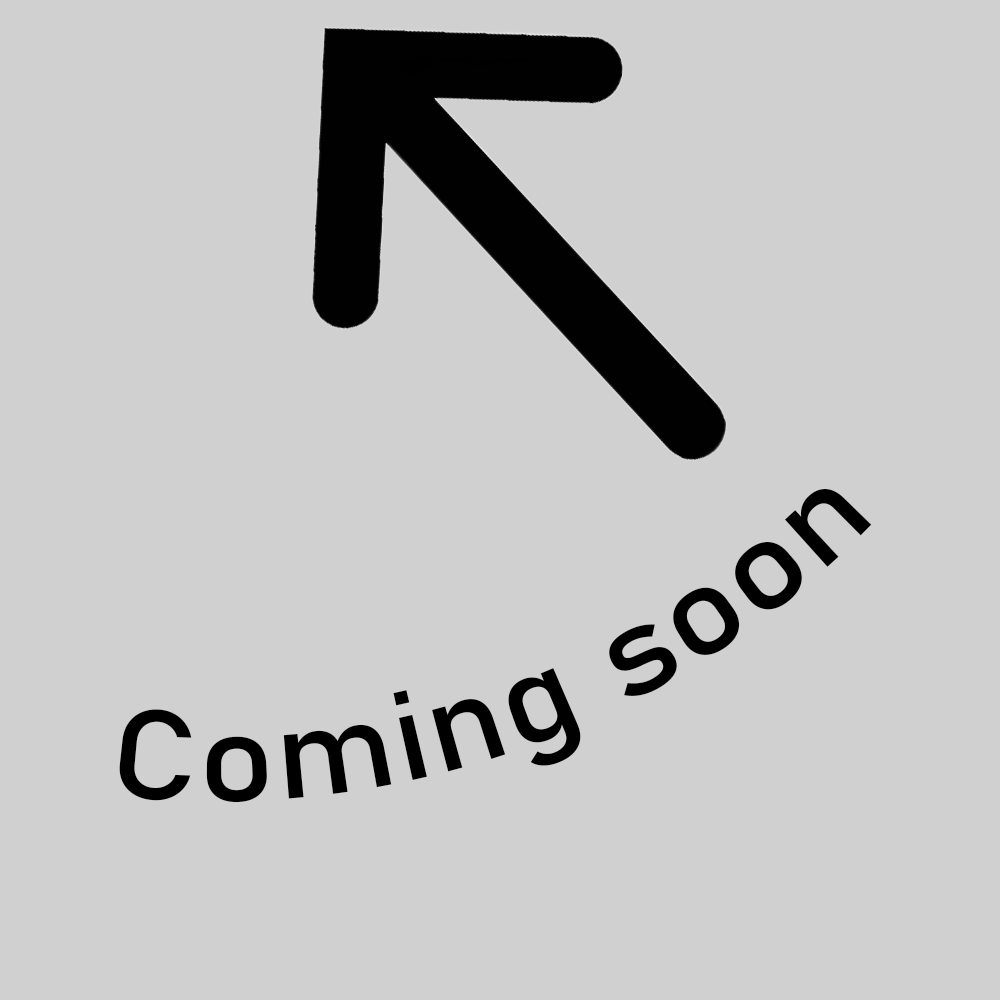
<style>
.page{position:relative;width:1000px;height:1000px;background:#d0d0d0}
.page>*{position:absolute;margin:0}
.t1{font:125px "Bahnschrift";color:#000000}
</style>
<div class="page">
<p class="t1" style="left:119px;top:489px;width:753px;height:314px;rotate:-20deg">Coming soon</p>
</div>
